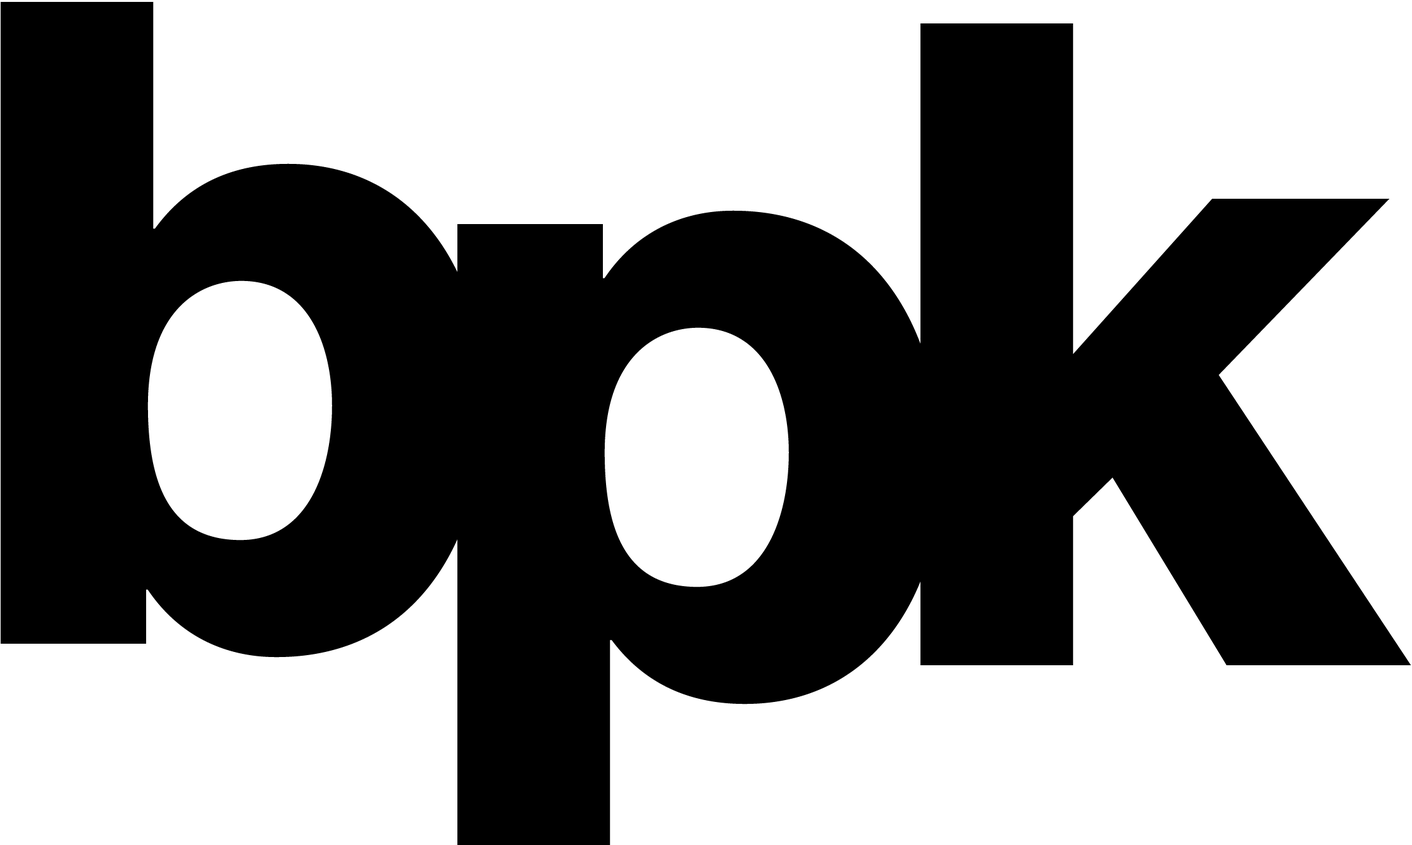
<style>
.page{position:relative;width:1412px;height:845px;background:#ffffff}
.page>*{position:absolute;margin:0}
.t1{font:898.4px "HelveticaNeue-Heavy";letter-spacing:-0.095em;color:#000000}
</style>
<div class="page">
<p class="t1" style="left:1px;top:2px;width:484px;height:655px">b</p>
<p class="t1" style="left:920px;top:23px;width:491px;height:642px">k</p>
</div>
